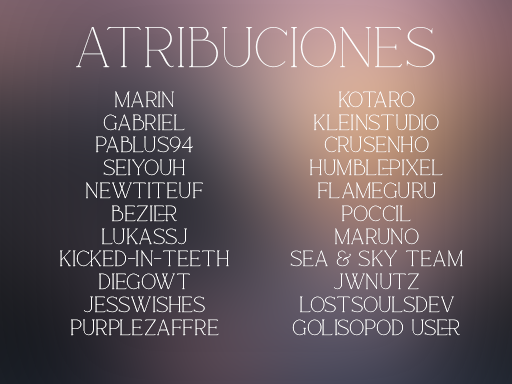
<style>
.page{position:relative;width:512px;height:384px}
.page>*{position:absolute;margin:0}
.t1{font:49.8px "Rotten";color:#ffffff;scale:0.96 1}
.t2{font:19px "Rotten";color:#ffffff;scale:0.96 1}
</style>
<div class="page">
<p class="t1" style="left:76px;top:27px;width:359px;height:41px">ATRIBUCIONES</p>
<p class="t2" style="left:60px;top:91px;width:169px;height:245px;text-align:center">MARIN<br>Gabriel<br>Pablus94<br>Seiyouh<br>newtiteuf<br>bezier<br>lukassj<br>kicked-in-teeth<br>Diegowt<br>Jesswishes<br>Purplezaffre</p>
<p class="t2" style="left:290px;top:91px;width:173px;height:245px;text-align:center">Kotaro<br>kleinstudio<br>Crusenho<br>humblepixel<br>flameguru<br>poccil<br>maruno<br>Sea &amp; Sky Team<br>JWNutz<br>lostsoulsdev<br>golisopod user</p>
</div>
